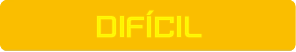
<style>
.page{position:relative;width:296px;height:52px;background:#fabe00}
.page>*{position:absolute;margin:0}
.t1{font:24px "KafuTechnoStd-HV";letter-spacing:0.024em;color:#fff400}
</style>
<div class="page">
<p class="t1" style="left:97px;top:10px;width:105px;height:28px">DIFÍCIL</p>
</div>
